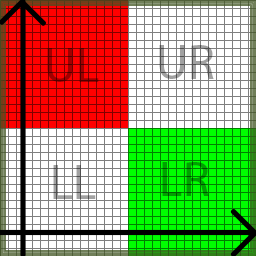
<style>
.page{position:relative;width:256px;height:256px;background:#ffffff}
.page>*{position:absolute;margin:0}
.t1{font:12px "MyriadPro-Regular";color:#a10000}
.t2{font:12px "MyriadPro-Regular";color:#a1a1a1}
.t3{font:12px "MyriadPro-Regular";color:#00a100}
</style>
<div class="page">
<p class="t1" style="left:47px;top:48px;width:52px;height:34px">UL</p>
<p class="t2" style="left:159px;top:45px;width:55px;height:34px">UR</p>
<p class="t2" style="left:53px;top:165px;width:43px;height:34px">LL</p>
<p class="t3" style="left:162px;top:162px;width:47px;height:34px">LR</p>
</div>
